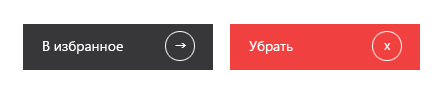
<style>
.page{position:relative;width:444px;height:96px;background:#ffffff}
.page>*{position:absolute;margin:0}
.t1{font:14px "SegoeUI";color:#ffffff}
</style>
<div class="page">
<p class="t1" style="left:43px;top:41px;width:80px;height:13px">В избранное</p>
<p class="t1" style="left:249px;top:41px;width:44px;height:13px">Убрать</p>
<p class="t1" style="left:384px;top:43px;width:7px;height:7px">х</p>
</div>
